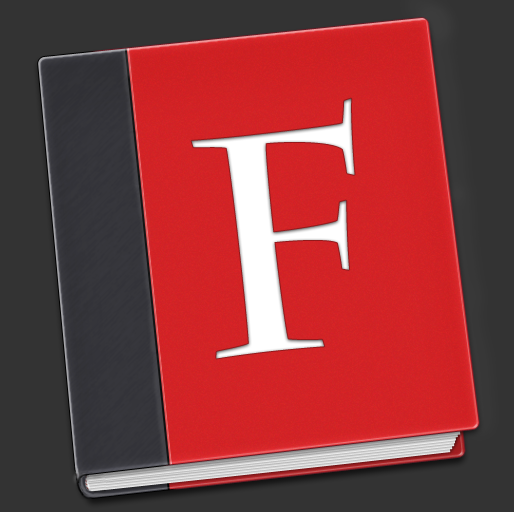
<style>
.page{position:relative;width:514px;height:512px;background:#333333}
.page>*{position:absolute;margin:0}
.t1{font:309.1px "CharlemagneStd-Bold";color:#ffffff}
</style>
<div class="page">
<p class="t1" style="left:191px;top:98px;width:164px;height:261px;rotate:-6deg">F</p>
</div>
